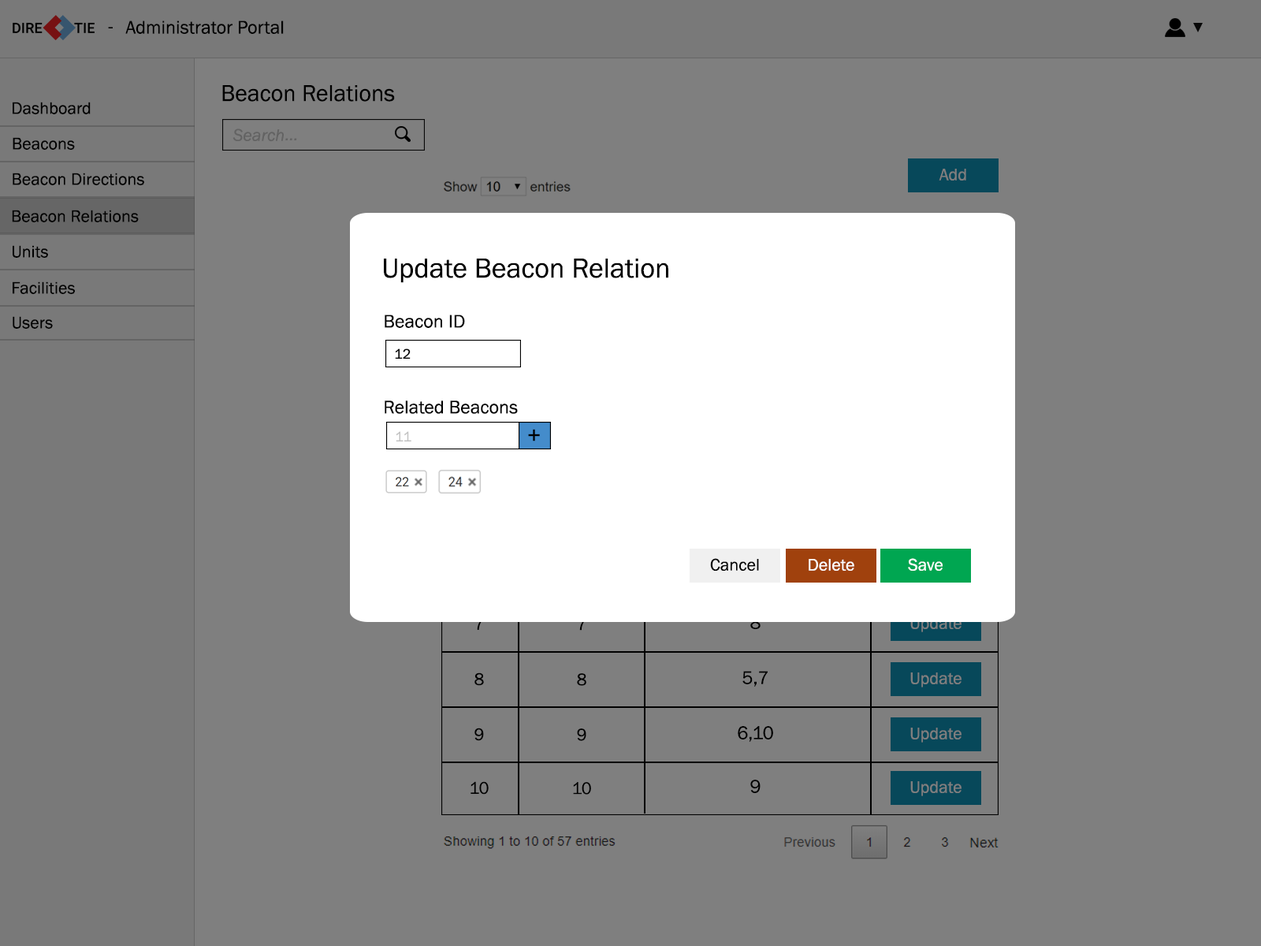
<style>
.page{position:relative;width:1261px;height:946px;background:#7f7f7f}
.page>*{position:absolute;margin:0}
.t1{font:18.9px "FranklinGothic-Book";color:#000000}
.t2{font:23.6px "FranklinGothic-Book";color:#000000}
.t3{font:17.3px "FranklinGothic-Book";color:#000000}
.t4{font:17.3px "FranklinGothic-Book";color:#7f7f7f}
.t5{font:28.4px "FranklinGothic-Book";color:#000000}
.t6{font:14.2px "FranklinGothic-Book";color:#000000}
.t7{font:14.2px "FranklinGothic-Book";color:#c2c2c2}
.t8{font:17.3px "FranklinGothic-Book";color:#010101}
.t9{font:17.3px "FranklinGothic-Book";color:#fefefe}
</style>
<div class="page">
<p class="t1" style="left:108px;top:27px;width:5px;height:1px">-</p>
<p class="t1" style="left:125px;top:20px;width:159px;height:14px">Administrator Portal</p>
<p class="t2" style="left:222px;top:85px;width:173px;height:17px">Beacon Relations</p>
<p class="t3" style="left:13px;top:102px;width:78px;height:12px">Dashboard</p>
<p class="t3" style="left:13px;top:137px;width:62px;height:13px">Beacons</p>
<p class="t3" style="left:13px;top:173px;width:131px;height:12px">Beacon Directions</p>
<p class="t4" style="left:939px;top:169px;width:27px;height:11px">Add</p>
<p class="t3" style="left:12px;top:210px;width:127px;height:12px">Beacon Relations</p>
<p class="t3" style="left:13px;top:245px;width:35px;height:13px">Units</p>
<p class="t5" style="left:384px;top:258px;width:284px;height:25px">Update Beacon Relation</p>
<p class="t3" style="left:13px;top:281px;width:62px;height:13px">Facilities</p>
<p class="t3" style="left:13px;top:316px;width:40px;height:13px">Users</p>
<p class="t1" style="left:385px;top:314px;width:80px;height:14px">Beacon ID</p>
<p class="t6" style="left:395px;top:348px;width:16px;height:11px">12</p>
<p class="t1" style="left:385px;top:400px;width:133px;height:14px">Related Beacons</p>
<p class="t7" style="left:396px;top:431px;width:15px;height:10px">11</p>
<p class="t2" style="left:528px;top:429px;width:12px;height:12px">+</p>
<p class="t8" style="left:710px;top:558px;width:49px;height:13px">Cancel</p>
<p class="t9" style="left:908px;top:558px;width:35px;height:13px">Save</p>
<p class="t9" style="left:809px;top:559px;width:45px;height:12px">Delete</p>
<p class="t3" style="left:474px;top:672px;width:10px;height:14px">8</p>
<p class="t3" style="left:577px;top:673px;width:9px;height:13px">8</p>
<p class="t1" style="left:742px;top:671px;width:26px;height:15px">5,7</p>
<p class="t4" style="left:910px;top:672px;width:51px;height:15px">Update</p>
<p class="t1" style="left:738px;top:726px;width:35px;height:16px">6,10</p>
<p class="t3" style="left:474px;top:727px;width:10px;height:14px">9</p>
<p class="t3" style="left:577px;top:728px;width:9px;height:13px">9</p>
<p class="t4" style="left:910px;top:727px;width:51px;height:15px">Update</p>
<p class="t3" style="left:470px;top:781px;width:19px;height:13px">10</p>
<p class="t3" style="left:573px;top:782px;width:18px;height:12px">10</p>
<p class="t1" style="left:750px;top:779px;width:10px;height:14px">9</p>
<p class="t4" style="left:910px;top:781px;width:51px;height:15px">Update</p>
</div>
